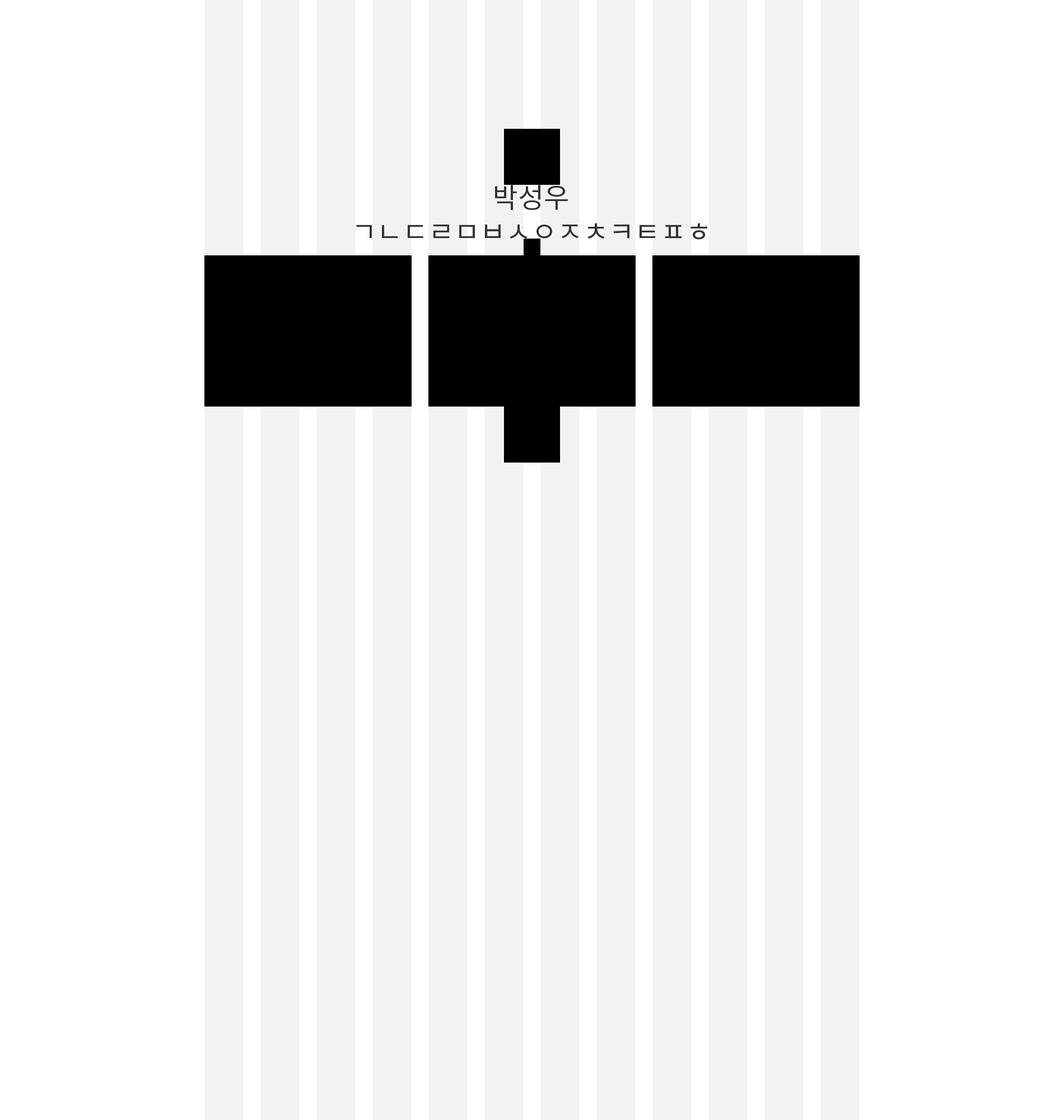
<style>
.page{position:relative;width:1064px;height:1120px;background:#ffffff}
.page>*{position:absolute;margin:0}
.t1{font:28px "NotoSansKR-Regular";color:#333333}
</style>
<div class="page">
<p class="t1" style="left:495px;top:185px;width:73px;height:25px">박성우</p>
<p class="t1" style="left:356px;top:223px;width:352px;height:17px">ㄱㄴㄷㄹㅁㅂㅅㅇㅈㅊㅋㅌㅍㅎ</p>
</div>
